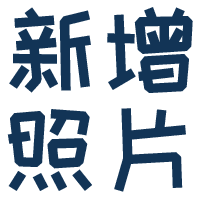
<style>
.page{position:relative;width:200px;height:200px;background:#ffffff}
.page>*{position:absolute;margin:0}
.t1{font:99.9px/99.9px "HappyZcool-2016";color:#123456}
</style>
<div class="page">
<p class="t1" style="left:7px;top:7px;width:186px;height:185px">新增<br>照片</p>
</div>
